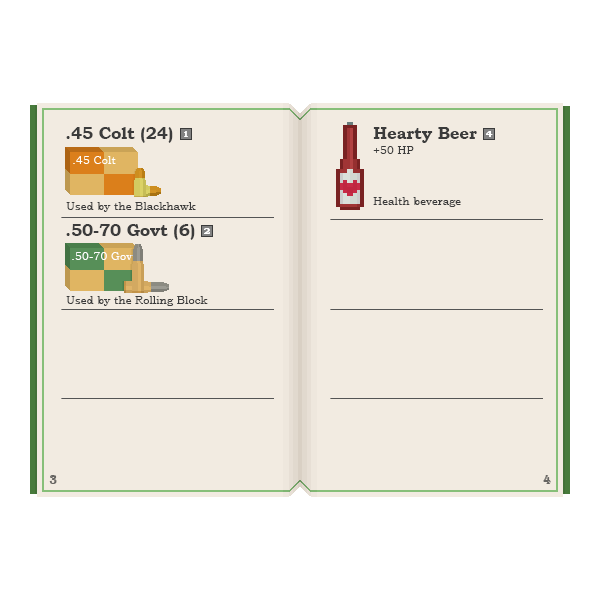
<style>
.page{position:relative;width:600px;height:600px;background:#f2ebe1}
.page>*{position:absolute;margin:0}
.t1{font:16.7px "BookmanOldStyle-Bold";color:#3b3b3b}
.t2{font:11.2px "BookmanOldStyle";color:#3b3b3b}
.t3{font:12.5px "Algerian";color:#545454;scale:36.36 1}
.t4{font:12.5px "Algerian";color:#676562}
</style>
<div class="page">
<p class="t1" style="left:66px;top:127px;width:107px;height:16px">.45 Colt (24)</p>
<p class="t1" style="left:373px;top:127px;width:104px;height:16px">Hearty Beer</p>
<p class="t2" style="left:373px;top:146px;width:41px;height:8px">+50 HP</p>
<p class="t2" style="left:373px;top:197px;width:88px;height:10px">Health beverage</p>
<p class="t2" style="left:66px;top:202px;width:130px;height:10px">Used by the Blackhawk</p>
<p class="t3" style="left:61px;top:217px;width:213px;height:1px">_</p>
<p class="t3" style="left:330px;top:219px;width:213px;height:1px">_</p>
<p class="t1" style="left:66px;top:224px;width:129px;height:16px">.50-70 Govt (6)</p>
<p class="t2" style="left:66px;top:296px;width:142px;height:10px">Used by the Rolling Block</p>
<p class="t3" style="left:61px;top:309px;width:213px;height:1px">_</p>
<p class="t3" style="left:330px;top:309px;width:213px;height:1px">_</p>
<p class="t3" style="left:61px;top:398px;width:213px;height:1px">_</p>
<p class="t3" style="left:330px;top:398px;width:213px;height:1px">_</p>
<p class="t4" style="left:49px;top:475px;width:8px;height:9px">3</p>
<p class="t4" style="left:543px;top:475px;width:8px;height:9px">4</p>
</div>
